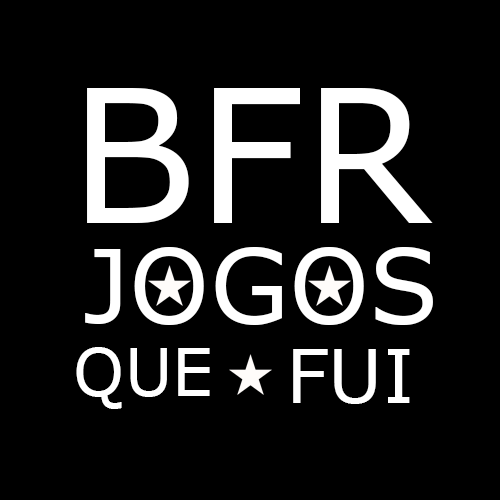
<style>
.page{position:relative;width:500px;height:500px;background:#000000}
.page>*{position:absolute;margin:0}
.t1{font:185.1px "Verdana";color:#ffffff}
.t2{font:102.4px "Verdana";color:#ffffff}
.t3{font:65.6px "Verdana";color:#ffffff}
.t4{font:74.4px "Verdana";color:#ffffff}
</style>
<div class="page">
<p class="t1" style="left:87px;top:88px;width:346px;height:135px">BFR</p>
<p class="t2" style="left:85px;top:247px;width:348px;height:78px">JOGOS</p>
<p class="t3" style="left:76px;top:347px;width:134px;height:62px">QUE</p>
<p class="t4" style="left:293px;top:349px;width:117px;height:55px">FUI</p>
</div>
